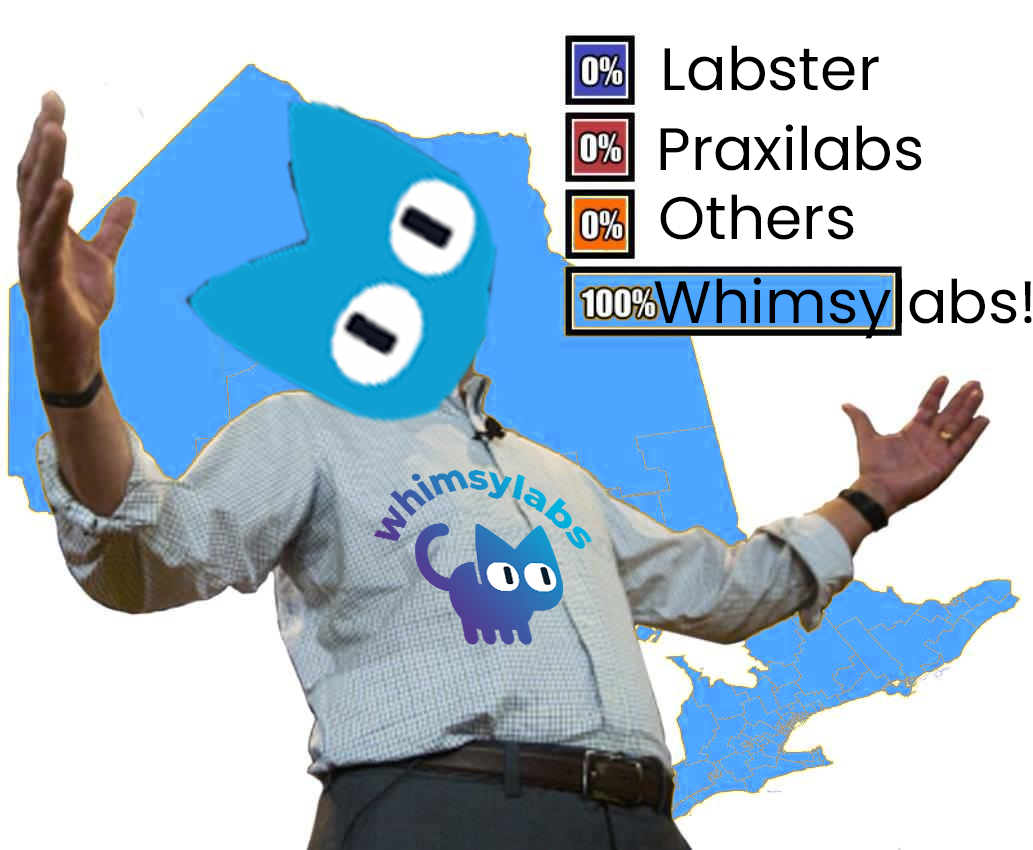
<style>
.page{position:relative;width:1033px;height:850px;background:#ffffff}
.page>*{position:absolute;margin:0}
.t1{font:60px "Poppins-Regular";color:#000000}
</style>
<div class="page">
<p class="t1" style="left:664px;top:45px;width:215px;height:46px">Labster</p>
<p class="t1" style="left:660px;top:124px;width:262px;height:47px">Praxilabs</p>
<p class="t1" style="left:660px;top:194px;width:194px;height:46px">Others</p>
<p class="t1" style="left:654px;top:277px;width:378px;height:62px">!Whimsylabs</p>
</div>
